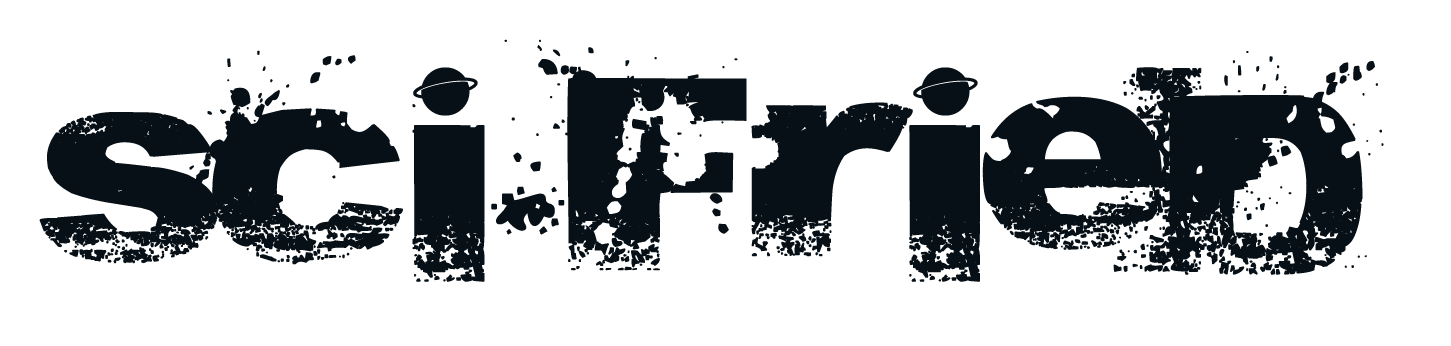
<style>
.page{position:relative;width:1451px;height:346px;background:#ffffff}
.page>*{position:absolute;margin:0}
.t1{font:200px "Abite";color:#071017;font-weight:bold}
.t2{font:200px "Acidic";color:#071017;font-weight:bold}
.t3{font:48px "Orbitronio";color:#071017;font-weight:bold}
</style>
<div class="page">
<p class="t1" style="left:39px;top:39px;width:1345px;height:243px">Sci<span class="t2">-</span>Fried</p>
<p class="t3" style="left:413px;top:67px;width:65px;height:49px">-</p>
<p class="t3" style="left:913px;top:67px;width:65px;height:49px">-</p>
</div>
